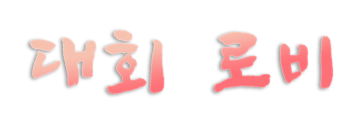
<style>
.page{position:relative;width:360px;height:120px;background:#ffffff}
.page>*{position:absolute;margin:0}
.t1{font:77.3px "SangSangRockOTF";letter-spacing:0.12em}
</style>
<div class="page">
<p class="t1" style="left:30px;top:30px;width:303px;height:64px">대회 로비</p>
</div>
